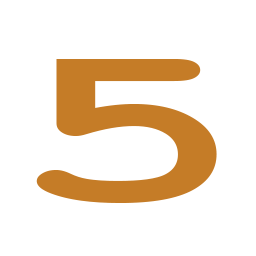
<style>
.page{position:relative;width:256px;height:256px;background:#ffffff}
.page>*{position:absolute;margin:0}
.t1{font:222.5px "CourierNewPS-BoldMT";color:#c57c27;scale:1.73 1}
</style>
<div class="page">
<p class="t1" style="left:36px;top:59px;width:181px;height:144px">5</p>
</div>
